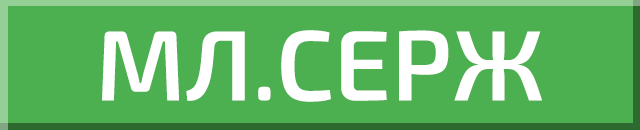
<style>
.page{position:relative;width:640px;height:130px;background:#4caf50}
.page>*{position:absolute;margin:0}
.t1{font:100px "Exo2-SemiBold";color:#ffffff}
</style>
<div class="page">
<p class="t1" style="left:102px;top:30px;width:440px;height:72px">МЛ.СЕРЖ</p>
</div>
